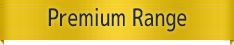
<style>
.page{position:relative;width:234px;height:45px}
.page>*{position:absolute;margin:0}
.t1{font:24px "mplus-1p-medium";color:#2c2c2c;scale:0.79 1}
</style>
<div class="page">
<p class="t1" style="left:48px;top:8px;width:139px;height:24px">Premium Range</p>
</div>
